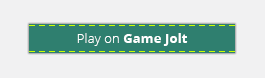
<style>
.page{position:relative;width:265px;height:78px;background:#f1f1f2}
.page>*{position:absolute;margin:0}
.t1{font:13px "OpenSans-Bold";letter-spacing:0.01em;color:#ffffff}
.t2{font:13px "OpenSans-Light";letter-spacing:0.01em;color:#ffffff}
</style>
<div class="page">
<p class="t1" style="left:77px;top:33px;width:111px;height:13px"><span class="t2">Play on </span>Game Jolt</p>
</div>
